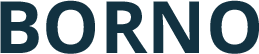
<style>
.page{position:relative;width:259px;height:54px;background:#123241}
.page>*{position:absolute;margin:0}
.t1{font:72px "OpenSans-Bold";color:#123241}
</style>
<div class="page">
<p class="t1" style="left:0px;top:0px;width:259px;height:54px">BORNO</p>
</div>
